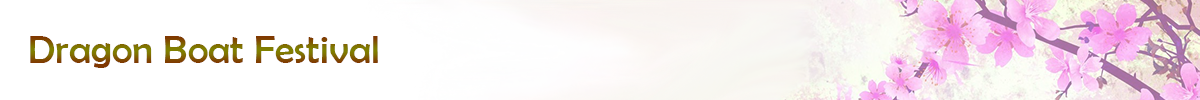
<style>
.page{position:relative;width:1200px;height:100px;background:#ffffff}
.page>*{position:absolute;margin:0}
.t1{font:40px "BerlinSansFB-Reg"}
</style>
<div class="page">
<p class="t1" style="left:30px;top:36px;width:348px;height:32px">Dragon Boat Festival</p>
</div>
